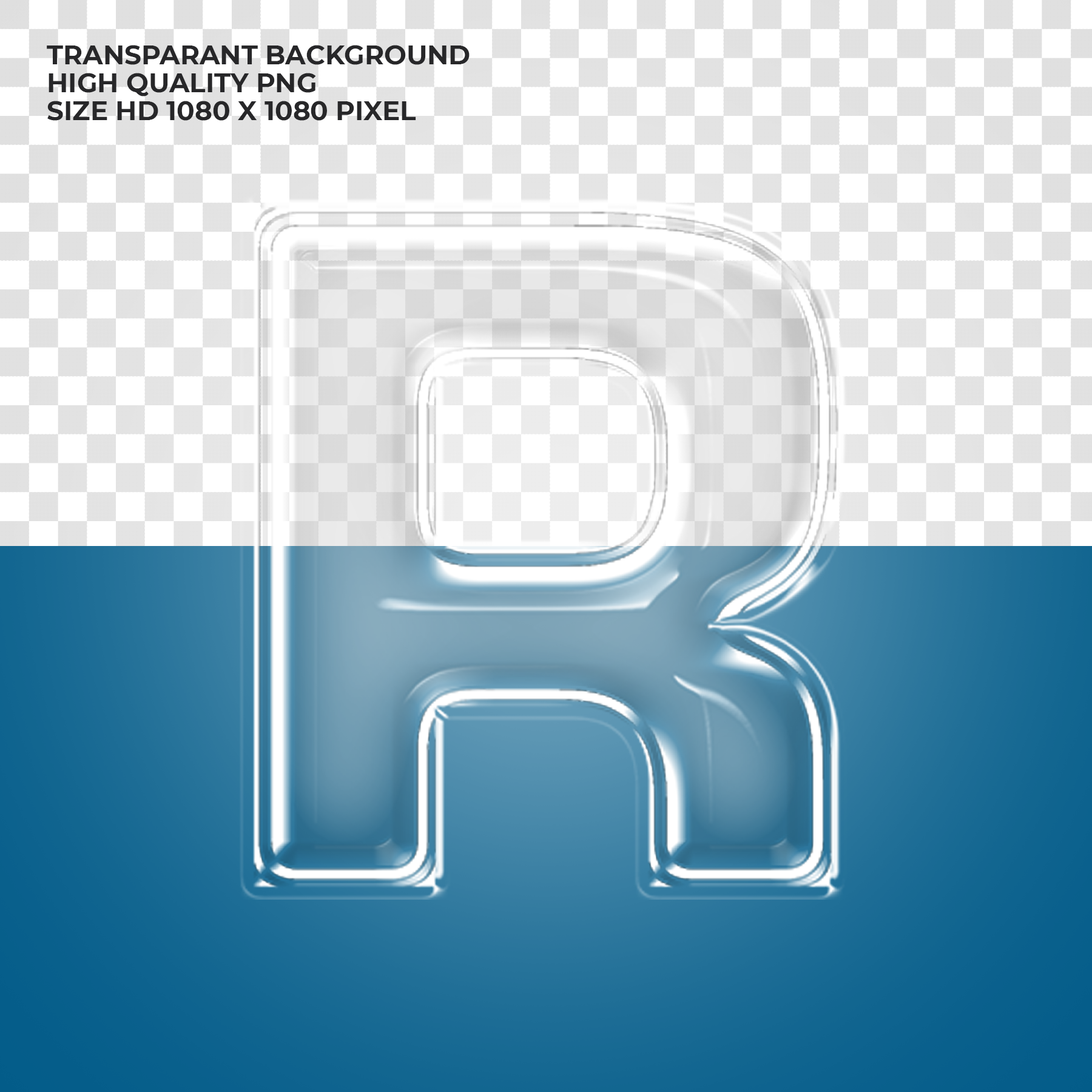
<style>
.page{position:relative;width:1092px;height:1092px}
.page>*{position:absolute;margin:0}
.t1{font:26.5px/27.9px "Montserrat-Bold";color:#272729;text-transform:uppercase}
</style>
<div class="page">
<p class="t1" style="left:47px;top:45px;width:423px;height:76px">Transparant Background<br>High Quality PNG<br>Size HD 1080 x 1080 Pixel</p>
</div>
